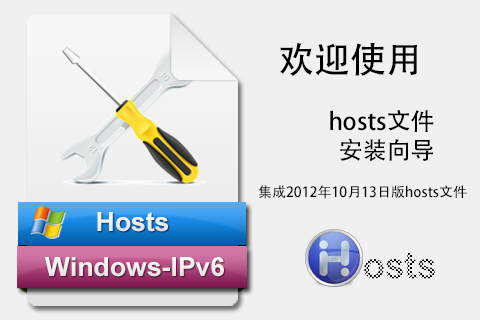
<style>
.page{position:relative;width:480px;height:320px;background:#f0f0f0}
.page>*{position:absolute;margin:0}
.t1{font:24px "AdobeHeitiStd-Regular";color:#000000}
.t2{font:36px "AdobeHeitiStd-Regular";color:#000000}
.t3{font:14px "AdobeHeitiStd-Regular";color:#000000}
.t4{font:26.5px "Arial-BoldMT";color:#ffffff}
.t5{font:26.6px "Arial-BoldMT";color:#ffffff}
.t6{font:36px "ArialRoundedMTBold"}
</style>
<div class="page">
<p class="t1" style="left:280px;top:42px;width:154px;height:120px"><span class="t2">欢迎使用<br></span><br>hosts文件<br>安装向导</p>
<p class="t3" style="left:258px;top:185px;width:209px;height:14px">集成2012年10月13日版hosts文件</p>
<p class="t4" style="left:97px;top:212px;width:71px;height:20px">Hosts</p>
<p class="t5" style="left:45px;top:257px;width:179px;height:20px">Windows-IPv6</p>
<p class="t6" style="left:364px;top:252px;width:71px;height:27px">osts</p>
</div>
